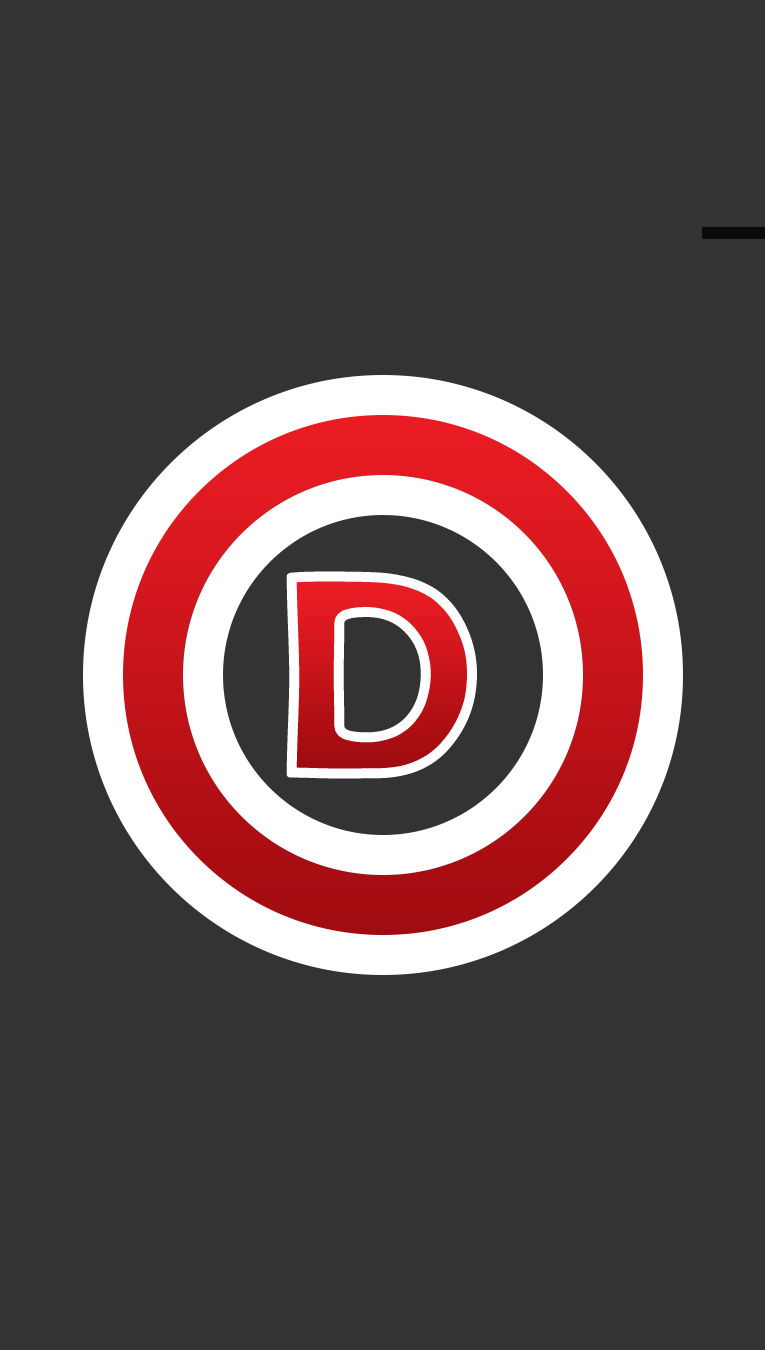
<style>
.page{position:relative;width:765px;height:1350px;background:#333333}
.page>*{position:absolute;margin:0}
.t1{font:300px "BerlinSansFBDemi-Bold";letter-spacing:0.2em}
</style>
<div class="page">
<p class="t1" style="left:286px;top:571px;width:191px;height:208px">D</p>
</div>
